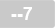
<style>
.page{position:relative;width:55px;height:28px;background:#c9c9c9}
.page>*{position:absolute;margin:0}
.t1{font:18.2px "Arial-BoldMT";color:#ffffff}
</style>
<div class="page">
<p class="t1" style="left:11px;top:7px;width:21px;height:13px">--7</p>
</div>
